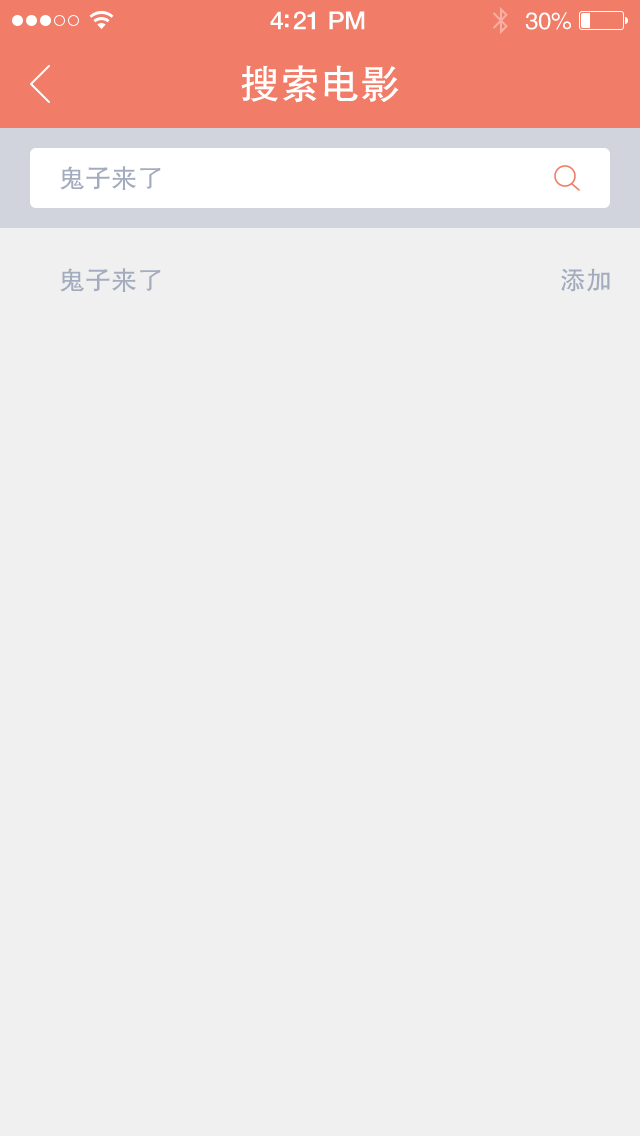
<style>
.page{position:relative;width:640px;height:1136px;background:#f0f0f0}
.page>*{position:absolute;margin:0}
.t1{font:25px "HelveticaNeue-Medium";letter-spacing:-0.02em;color:#ffffff}
.t2{font:24px "FZHTJW--GB1-0";letter-spacing:-0.02em;color:#ffffff}
.t3{font:40px "FZHTJW--GB1-0";color:#ffffff}
.t4{font:26px "FZHTJW--GB1-0";color:#a3abbe}
</style>
<div class="page">
<p class="t1" style="left:270px;top:11px;width:95px;height:19px">4:21 PM</p>
<p class="t2" style="left:525px;top:12px;width:46px;height:18px">30%</p>
<p class="t3" style="left:241px;top:65px;width:158px;height:38px">搜索电影</p>
<p class="t4" style="left:60px;top:166px;width:101px;height:24px">鬼子来了</p>
<p class="t4" style="left:60px;top:268px;width:101px;height:24px">鬼子来了</p>
<p class="t4" style="left:561px;top:268px;width:49px;height:24px">添加</p>
</div>
